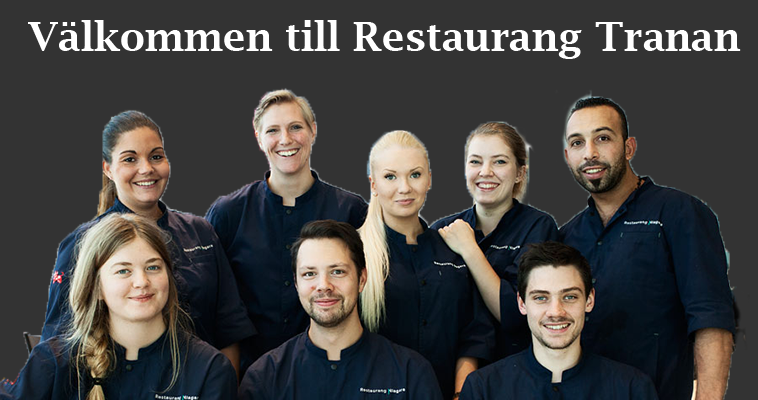
<style>
.page{position:relative;width:758px;height:400px;background:#333333}
.page>*{position:absolute;margin:0}
.t1{font:40.4px "LucidaBright-Demi";color:#ffffff}
</style>
<div class="page">
<p class="t1" style="left:28px;top:20px;width:713px;height:39px">Välkommen till Restaurang Tranan</p>
</div>
